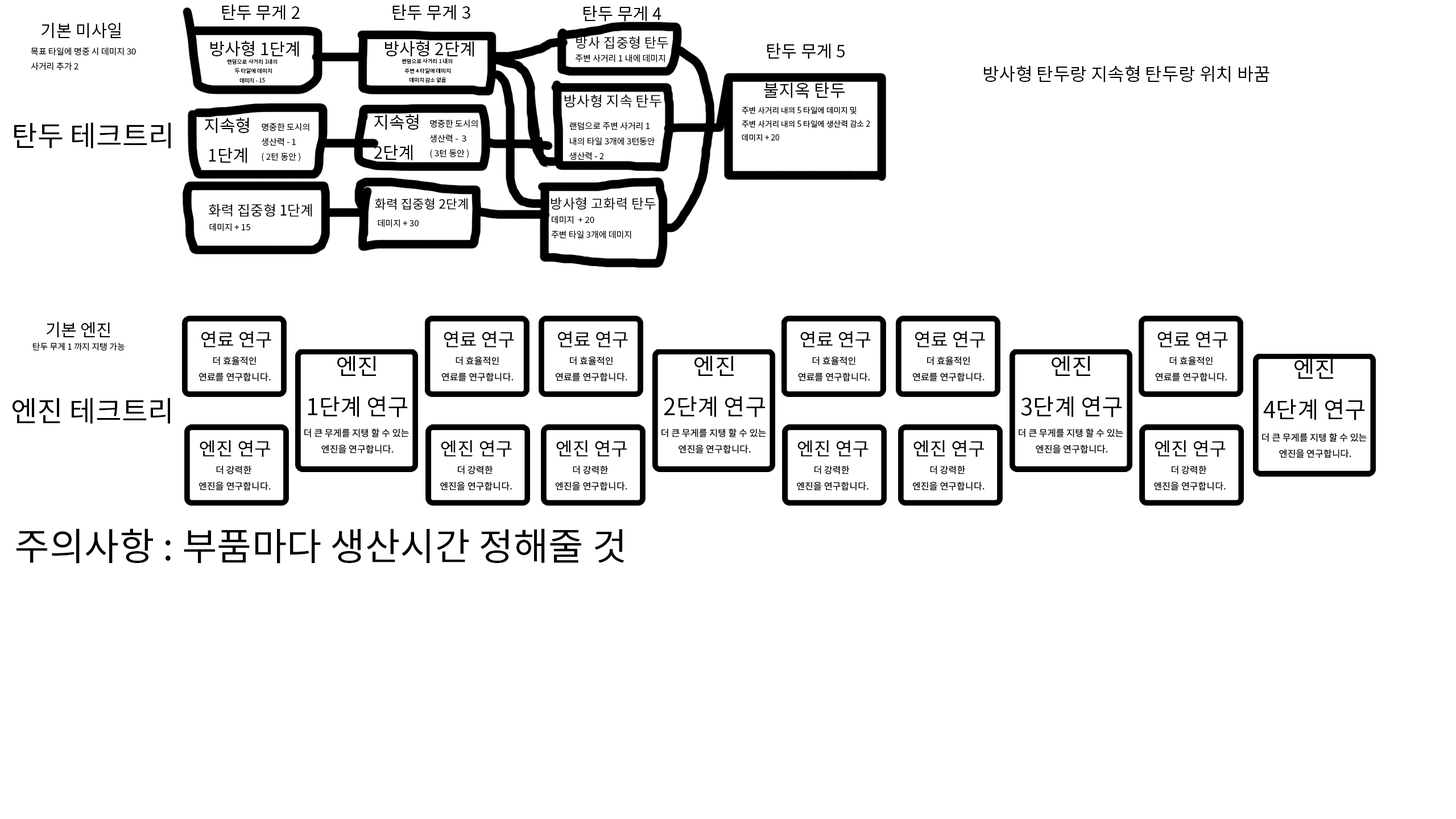
<style>
.page{position:relative;width:1456px;height:819px;background:#ffffff}
.page>*{position:absolute;margin:0}
.t1{font:17.1px "NotoSansCJKkr-Regular";color:#000000}
.t2{font:13.6px "NotoSansCJKkr-Regular";color:#000000}
.t3{font:8.5px "NotoSansCJKkr-Regular";color:#000000}
.t4{font:5.5px "NotoSansCJKkr-Regular";color:#000000}
.t5{font:5.4px "NotoSansCJKkr-Regular";color:#000000}
.t6{font:18.2px "NotoSansCJKkr-Regular";color:#000000}
.t7{font:14.3px "NotoSansCJKkr-Regular";color:#000000}
.t8{font:7.8px "NotoSansCJKkr-Regular";color:#000000}
.t9{font:28.4px "NotoSansCJKkr-Regular";color:#000000}
.t10{font:12.7px "NotoSansCJKkr-Regular";color:#000000}
.t11{font:14.1px "NotoSansCJKkr-Regular";color:#000000}
.t12{font:23px "NotoSansCJKkr-Regular";color:#000000}
.t13{font:38px "NotoSansCJKkr-Regular";color:#000000}
</style>
<div class="page">
<p class="t1" style="left:222px;top:4px;width:78px;height:16px">탄두 무게 2</p>
<p class="t1" style="left:392px;top:4px;width:78px;height:16px">탄두 무게 3</p>
<p class="t1" style="left:584px;top:5px;width:77px;height:17px">탄두 무게 4</p>
<p class="t1" style="left:41px;top:23px;width:80px;height:15px">기본 미사일</p>
<p class="t1" style="left:210px;top:40px;width:89px;height:17px">방사형 1단계</p>
<p class="t1" style="left:385px;top:40px;width:89px;height:17px">방사형 2단계</p>
<p class="t2" style="left:576px;top:36px;width:92px;height:13px">방사 집중형 탄두</p>
<p class="t3" style="left:31px;top:47px;width:105px;height:24px">목표 타일에 명중 시 데미지 30<br>사거리 추가 2</p>
<p class="t1" style="left:767px;top:43px;width:78px;height:16px">탄두 무게 5</p>
<p class="t4" style="left:227px;top:59px;width:50px;height:24px;text-align:center">랜덤으로 사거리 1내의<br>  두 타일에 데미지<br>데미지 - 15</p>
<p class="t5" style="left:402px;top:58px;width:50px;height:24px;text-align:center">랜덤으로 사거리 1 내의 <br>주변 4 타일에 데미지<br>데미지 감소 없음</p>
<p class="t3" style="left:576px;top:54px;width:89px;height:9px">주변 사거리 1 내에 데미지</p>
<p class="t6" style="left:984px;top:65px;width:285px;height:17px">방사형 탄두랑 지속형 탄두랑 위치 바꿈</p>
<p class="t1" style="left:764px;top:82px;width:81px;height:16px">불지옥 탄두</p>
<p class="t7" style="left:564px;top:94px;width:98px;height:13px">방사형 지속 탄두</p>
<p class="t1" style="left:374px;top:114px;width:45px;height:46px">지속형<br>2단계</p>
<p class="t8" style="left:742px;top:106px;width:128px;height:36px">주변 사거리 내의 5 타일에 데미지 및 <br>주변 사거리 내의 5 타일에 생산력 감소 2<br>데미지 + 20</p>
<p class="t9" style="left:14px;top:122px;width:157px;height:26px">탄두 테크트리</p>
<p class="t1" style="left:204px;top:117px;width:45px;height:46px">지속형<br> 1단계</p>
<p class="t3" style="left:262px;top:123px;width:47px;height:39px">명중한 도시의 <br>생산력 - 1 <br>( 2턴 동안 )</p>
<p class="t3" style="left:430px;top:119px;width:48px;height:39px">명중한 도시의<br>생산력 -  3<br>( 3턴 동안 )</p>
<p class="t3" style="left:569px;top:122px;width:86px;height:38px">랜덤으로 주변 사거리 1 <br>내의 타일 3개에 3턴동안 <br>생산력 - 2</p>
<p class="t10" style="left:375px;top:198px;width:93px;height:12px">화력 집중형 2단계</p>
<p class="t2" style="left:551px;top:197px;width:105px;height:13px">방사형 고화력 탄두</p>
<p class="t11" style="left:209px;top:204px;width:103px;height:13px">화력 집중형 1단계</p>
<p class="t3" style="left:378px;top:219px;width:41px;height:8px">데미지 + 30</p>
<p class="t3" style="left:551px;top:216px;width:80px;height:23px">데미지  + 20<br>주변 타일 3개에 데미지</p>
<p class="t3" style="left:209px;top:223px;width:41px;height:8px">데미지 + 15</p>
<p class="t1" style="left:46px;top:322px;width:64px;height:15px">기본 엔진</p>
<p class="t3" style="left:33px;top:342px;width:92px;height:9px">탄두 무게 1 까지 지탱 가능</p>
<p class="t12" style="left:308px;top:355px;width:100px;height:62px;text-align:center">엔진<br>1단계 연구</p>
<p class="t12" style="left:664px;top:355px;width:102px;height:62px;text-align:center">엔진<br>2단계 연구</p>
<p class="t12" style="left:1021px;top:355px;width:101px;height:62px;text-align:center">엔진<br>3단계 연구</p>
<p class="t12" style="left:1263px;top:358px;width:102px;height:62px;text-align:center">엔진<br>4단계 연구</p>
<p class="t9" style="left:13px;top:398px;width:157px;height:26px">엔진 테크트리</p>
<p class="t13" style="left:16px;top:528px;width:608px;height:36px">주의사항 : 부품마다 생산시간 정해줄 것</p>
</div>
